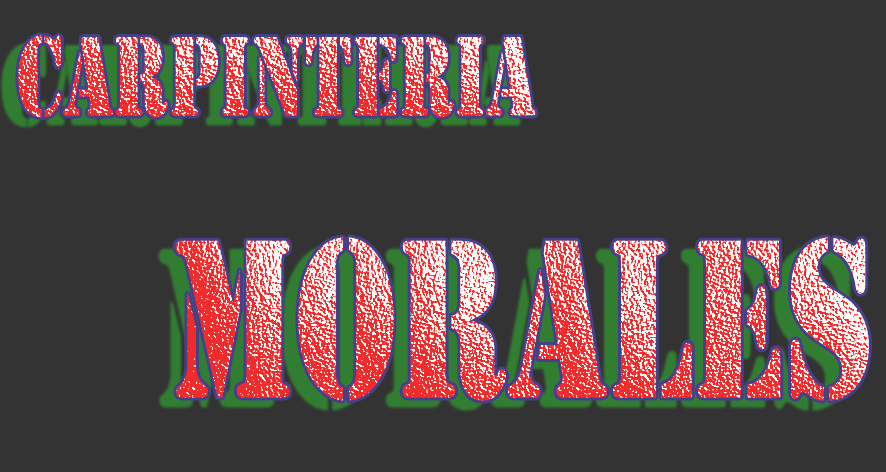
<style>
.page{position:relative;width:886px;height:472px;background:#333333}
.page>*{position:absolute;margin:0}
.t1{font:117.4px "Stencil";scale:0.68 1}
.t2{font:234.9px "Stencil";scale:0.68 1}
</style>
<div class="page">
<p class="t1" style="left:18px;top:35px;width:851px;height:366px">carpinteria<br>   <span class="t2">morales</span></p>
</div>
